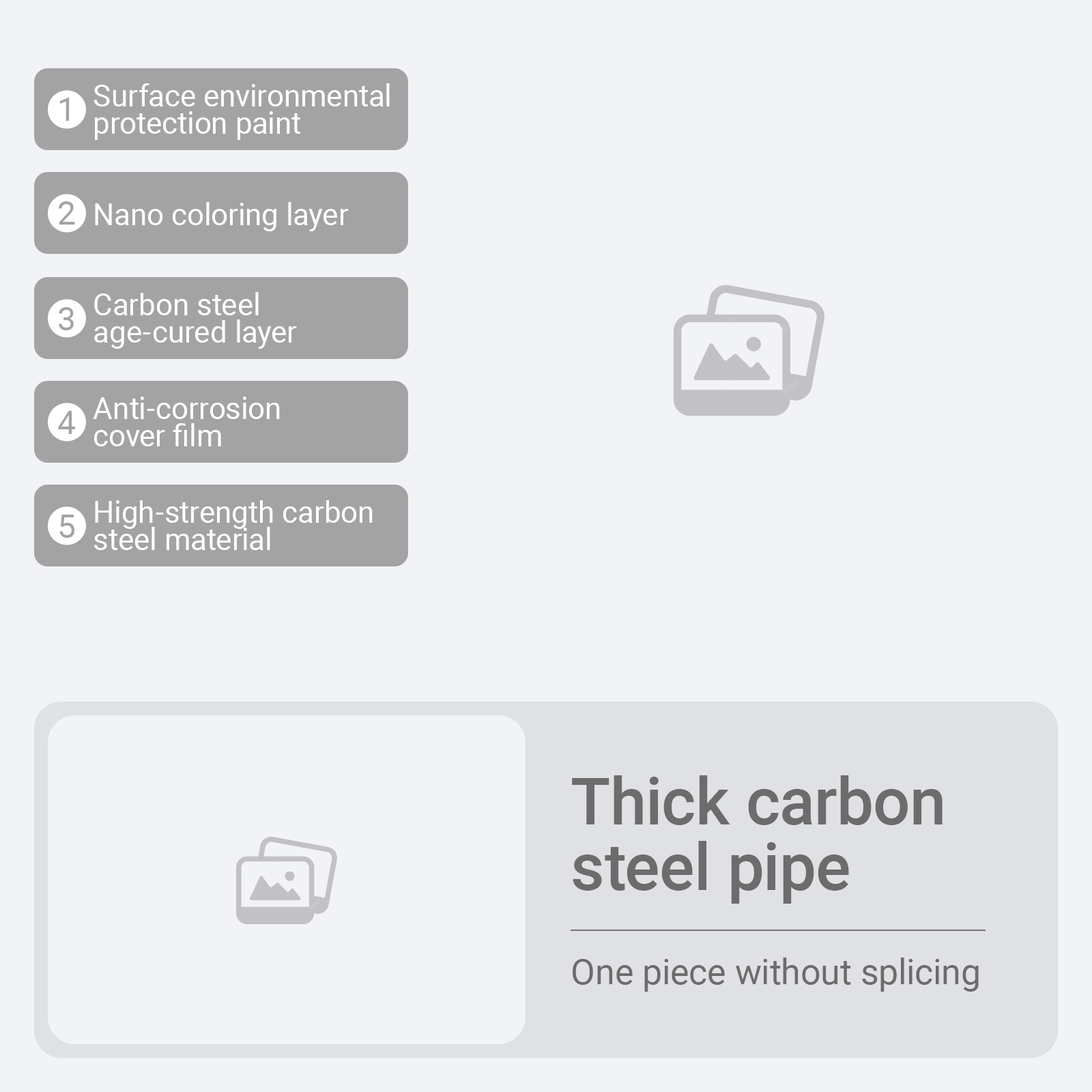
<style>
.page{position:relative;width:1092px;height:1092px;background:#f2f3f6}
.page>*{position:absolute;margin:0}
.t1{font:30px/27.3px "Roboto-Regular";color:#ffffff}
.t2{font:32.8px "Roboto-Regular";color:#a3a3a3}
.t3{font:30px "Roboto-Regular";color:#ffffff}
.t4{font:65.5px/65.5px "Roboto-Medium";color:#6c6c6c}
.t5{font:35.5px "Roboto-Regular";color:#6c6c6c}
</style>
<div class="page">
<p class="t1" style="left:94px;top:83px;width:296px;height:57px">Surface environmental <br>protection paint</p>
<p class="t2" style="left:60px;top:98px;width:10px;height:23px">1</p>
<p class="t2" style="left:59px;top:201px;width:16px;height:24px">2</p>
<p class="t3" style="left:95px;top:202px;width:254px;height:29px">Nano coloring layer</p>
<p class="t1" style="left:94px;top:292px;width:203px;height:57px">Carbon steel <br>age-cured layer</p>
<p class="t2" style="left:59px;top:307px;width:15px;height:23px">3</p>
<p class="t1" style="left:93px;top:397px;width:187px;height:49px">Anti-corrosion <br>cover film</p>
<p class="t2" style="left:58px;top:411px;width:17px;height:23px">4</p>
<p class="t1" style="left:94px;top:500px;width:279px;height:50px">High-strength carbon <br>steel material</p>
<p class="t2" style="left:59px;top:515px;width:16px;height:23px">5</p>
<p class="t4" style="left:572px;top:775px;width:371px;height:129px">Thick carbon<br>steel pipe</p>
<p class="t5" style="left:573px;top:958px;width:406px;height:34px">One piece without splicing</p>
</div>
